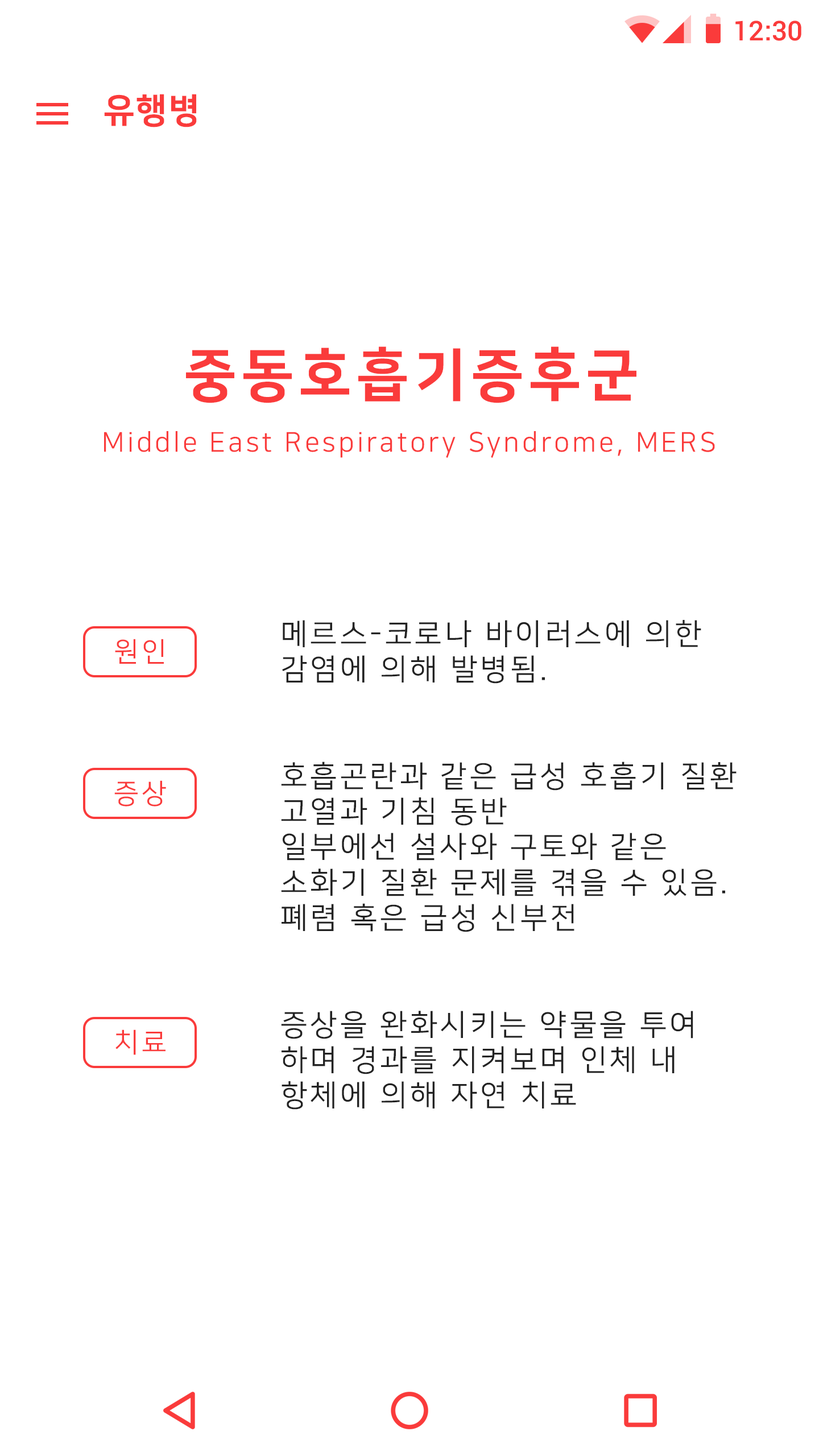
<style>
.page{position:relative;width:819px;height:1456px;background:#ffffff}
.page>*{position:absolute;margin:0}
.t1{font:27.3px "Roboto-Medium";color:#fa3b3b}
.t2{font:34.1px "NanumSquareEB";letter-spacing:0.05em;color:#fa3b3b}
.t3{font:56.9px "NanumSquareEB";letter-spacing:0.1em;color:#fa3b3b}
.t4{font:27.3px "NanumSquareR";letter-spacing:0.1em;color:#fa3b3b}
.t5{font:29.6px "NanumSquareR";letter-spacing:0.1em;color:#222222}
</style>
<div class="page">
<p class="t1" style="left:735px;top:20px;width:66px;height:21px">12:30</p>
<p class="t2" style="left:104px;top:94px;width:93px;height:33px">유행병</p>
<p class="t3" style="left:186px;top:346px;width:450px;height:57px">중동호흡기증후군</p>
<p class="t4" style="left:104px;top:431px;width:611px;height:27px">Middle East Respiratory Syndrome, MERS</p>
<p class="t5" style="left:282px;top:620px;width:419px;height:64px">메르스-코로나 바이러스에 의한<br>감염에 의해 발병됨.</p>
<p class="t4" style="left:115px;top:639px;width:49px;height:25px">원인</p>
<p class="t5" style="left:281px;top:762px;width:456px;height:170px">호흡곤란과 같은 급성 호흡기 질환<br>고열과 기침 동반<br>일부에선 설사와 구토와 같은<br>소화기 질환 문제를 겪을 수 있음.<br>폐렴 혹은 급성 신부전</p>
<p class="t4" style="left:114px;top:780px;width:52px;height:26px">증상</p>
<p class="t5" style="left:281px;top:1011px;width:412px;height:99px">증상을 완화시키는 약물을 투여<br>하며 경과를 지켜보며 인체 내<br>항체에 의해 자연 치료</p>
<p class="t4" style="left:115px;top:1029px;width:51px;height:26px">치료</p>
</div>
